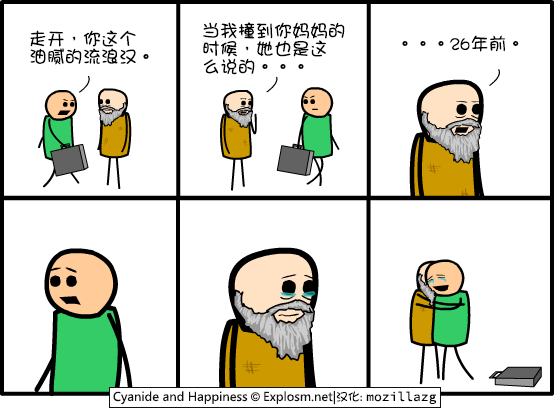
<style>
.page{position:relative;width:555px;height:409px;background:#ffffff}
.page>*{position:absolute;margin:0}
.t1{font:18px/18px "DFGirl";color:#000000}
.t2{font:18px "DFGirl";color:#000000}
</style>
<div class="page">
<p class="t1" style="left:30px;top:30px;width:119px;height:35px">走开，你这个<br>油腻的流浪汉。</p>
<p class="t1" style="left:203px;top:22px;width:142px;height:53px">当我撞到你妈妈的<br>时候，她也是这<br>么说的。。。</p>
<p class="t2" style="left:402px;top:35px;width:117px;height:17px">。。。26年前。</p>
</div>
